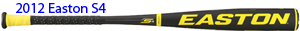
<style>
.page{position:relative;width:300px;height:31px;background:#ffffff}
.page>*{position:absolute;margin:0}
.t1{font:14.3px "MyriadPro-Regular";color:#0000ff}
</style>
<div class="page">
<p class="t1" style="left:16px;top:3px;width:90px;height:10px">2012 Easton S4</p>
</div>
